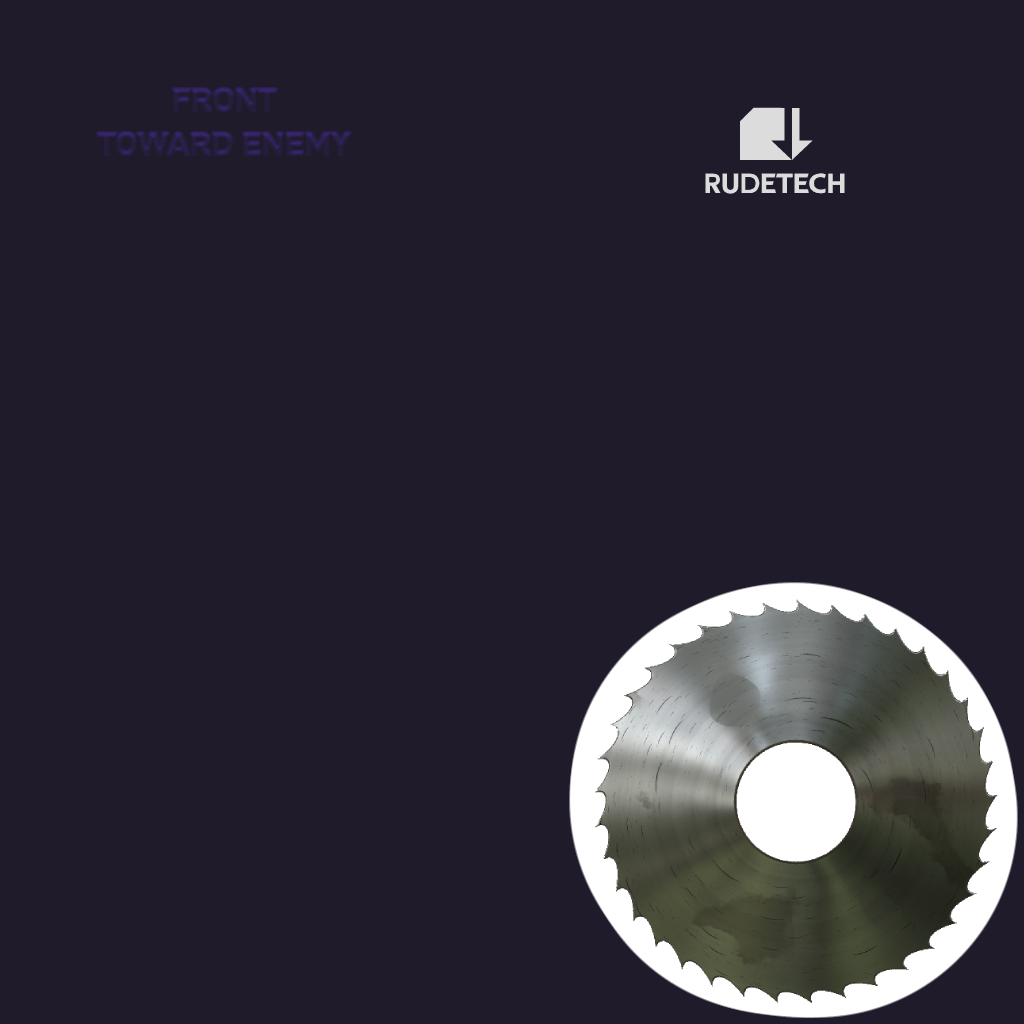
<style>
.page{position:relative;width:1024px;height:1024px;background:#1f1b2b}
.page>*{position:absolute;margin:0}
.t1{font:32px "D-DINExp-Bold";color:#251e3a;text-transform:uppercase;font-weight:bold}
</style>
<div class="page">
<p class="t1" style="left:97px;top:89px;width:254px;height:68px;text-align:center">Front<br>Toward Enemy</p>
</div>
